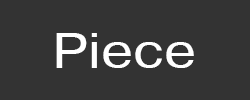
<style>
.page{position:relative;width:250px;height:100px;background:#333333}
.page>*{position:absolute;margin:0}
.t1{font:48px "Helvetica";color:#ffffff;scale:1.2 1}
</style>
<div class="page">
<p class="t1" style="left:56px;top:33px;width:138px;height:35px">Piece</p>
</div>
